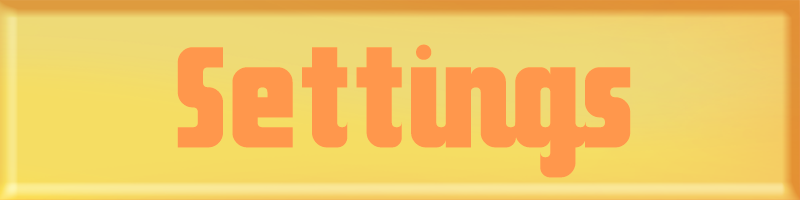
<style>
.page{position:relative;width:800px;height:200px}
.page>*{position:absolute;margin:0}
.t1{font:200px "Makimango";color:#ff974c}
</style>
<div class="page">
<p class="t1" style="left:177px;top:44px;width:454px;height:134px">Settings</p>
<p class="t1" style="left:177px;top:44px;width:454px;height:134px">Settings</p>
</div>
